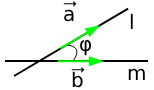
<style>
.page{position:relative;width:154px;height:90px;background:#ffffff}
.page>*{position:absolute;margin:0}
.t1{font:20px "DejaVuSans";color:#000000}
</style>
<div class="page">
<p class="t1" style="left:64px;top:9px;width:10px;height:13px">a</p>
<p class="t1" style="left:130px;top:13px;width:3px;height:16px">l</p>
<p class="t1" style="left:80px;top:39px;width:12px;height:17px">φ</p>
<p class="t1" style="left:72px;top:71px;width:11px;height:17px">b</p>
<p class="t1" style="left:128px;top:68px;width:17px;height:12px">m</p>
</div>
